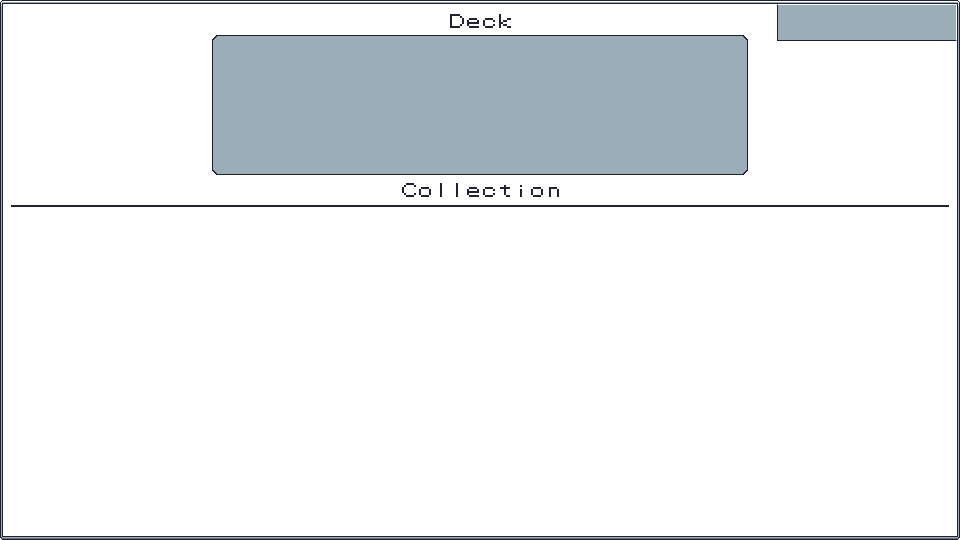
<style>
.page{position:relative;width:960px;height:540px;background:#ffffff}
.page>*{position:absolute;margin:0}
.t1{font:16px "PokemonTTF";color:#222034}
</style>
<div class="page">
<p class="t1" style="left:450px;top:14px;width:61px;height:14px">Deck</p>
<p class="t1" style="left:402px;top:183px;width:157px;height:14px">Collection</p>
</div>
